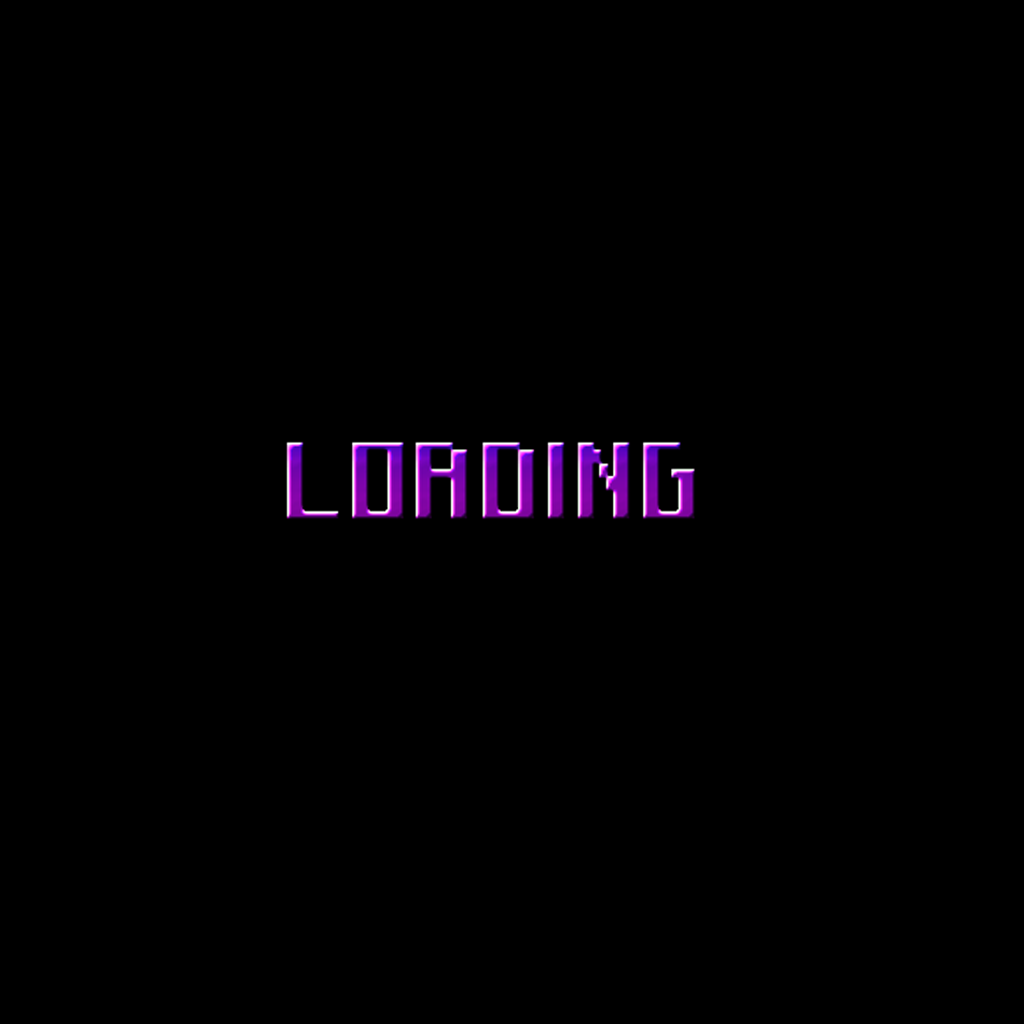
<style>
.page{position:relative;width:1024px;height:1024px;background:#000000}
.page>*{position:absolute;margin:0}
.t1{font:132.5px "Starcadia";font-weight:bold}
</style>
<div class="page">
<p class="t1" style="left:287px;top:441px;width:405px;height:76px">loading</p>
</div>
